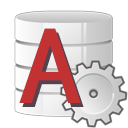
<style>
.page{position:relative;width:128px;height:128px;background:#ffffff}
.page>*{position:absolute;margin:0}
.t1{font:110px "SimHei";letter-spacing:-0.05em;color:#c33232;scale:1.18 1}
</style>
<div class="page">
<p class="t1" style="left:19px;top:28px;width:62px;height:75px">A</p>
<p class="t1" style="left:22px;top:32px;width:62px;height:75px">A</p>
</div>
